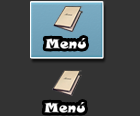
<style>
.page{position:relative;width:140px;height:116px;background:#333333}
.page>*{position:absolute;margin:0}
.t1{font:13.3px "SnapITC-Regular";color:#ffffff;scale:1.03 1}
</style>
<div class="page">
<p class="t1" style="left:45px;top:38px;width:41px;height:11px">Menú</p>
<p class="t1" style="left:44px;top:102px;width:41px;height:11px">Menú</p>
</div>
